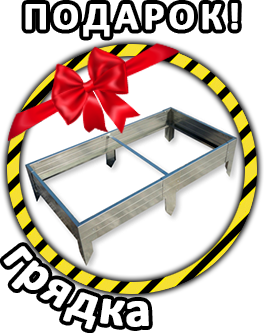
<style>
.page{position:relative;width:264px;height:333px;background:#ffffff}
.page>*{position:absolute;margin:0}
.t1{font:39.2px "Calibri-Bold";letter-spacing:0.1em;color:#ffffff;font-weight:bold}
.t2{font:51.2px "Calibri-Bold";letter-spacing:0.05em;color:#ffffff;font-weight:bold}
</style>
<div class="page">
<p class="t1" style="left:25px;top:3px;width:213px;height:34px">ПОДАРОК!</p>
<p class="t2" style="left:3px;top:246px;width:146px;height:84px">грядка</p>
</div>
